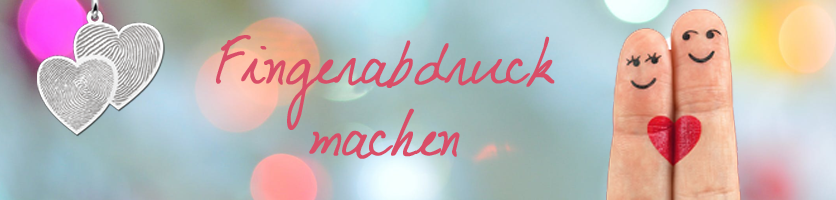
<style>
.page{position:relative;width:836px;height:200px}
.page>*{position:absolute;margin:0}
.t1{font:48px/72px "DJBMyBoyfriend'sHandwriting";color:#d94e68;font-weight:bold}
</style>
<div class="page">
<p class="t1" style="left:216px;top:35px;width:339px;height:124px;text-align:center">Fingerabdruck <br>machen</p>
</div>
